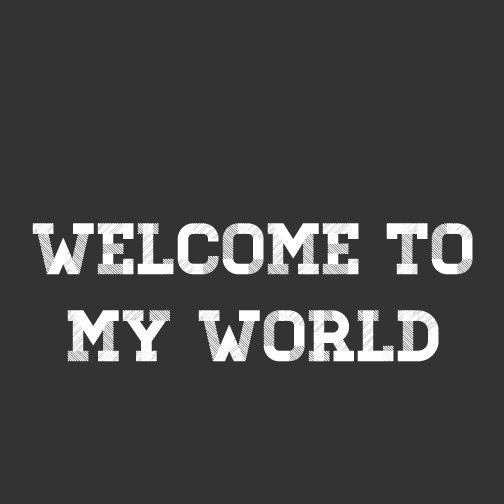
<style>
.page{position:relative;width:504px;height:504px;background:#333333}
.page>*{position:absolute;margin:0}
.t1{font:72px "Homestead-Display";color:#ffffff}
</style>
<div class="page">
<p class="t1" style="left:32px;top:223px;width:441px;height:139px;text-align:center">Welcome to<br>MY world</p>
</div>
